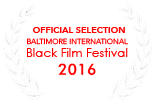
<style>
.page{position:relative;width:154px;height:100px;background:#ffffff}
.page>*{position:absolute;margin:0}
.t1{font:9px "Avenir-Heavy";color:#ff0000}
.t2{font:7.5px "Avenir-Light";color:#ff0000}
.t3{font:12px "CenturyGothic";color:#ff0000}
</style>
<div class="page">
<p class="t1" style="left:33px;top:27px;width:92px;height:6px">OFFICIAL SELECTION</p>
<p class="t2" style="left:27px;top:38px;width:101px;height:7px">BALTIMORE INTERNATIONAL</p>
<p class="t3" style="left:27px;top:48px;width:101px;height:9px">Black Film Festival</p>
</div>
